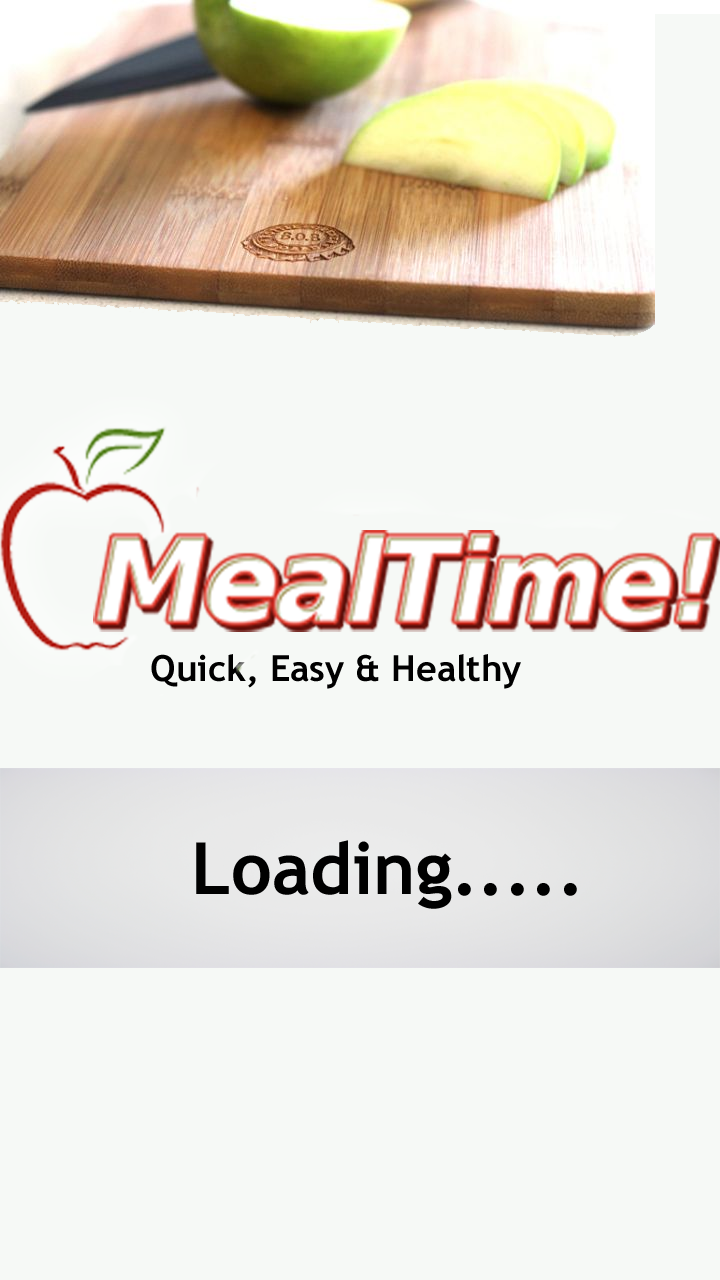
<style>
.page{position:relative;width:720px;height:1280px;background:#f6f9f6}
.page>*{position:absolute;margin:0}
.t1{font:36px "TrebuchetMS-Bold";color:#000000}
.t2{font:72px "TrebuchetMS-Bold";color:#000000}
</style>
<div class="page">
<p class="t1" style="left:151px;top:654px;width:370px;height:35px">Quick, Easy &amp; Healthy</p>
<p class="t2" style="left:196px;top:840px;width:381px;height:69px">Loading.....</p>
</div>
